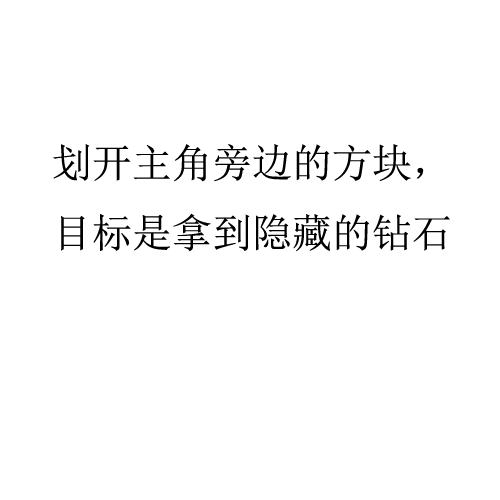
<style>
.page{position:relative;width:500px;height:500px;background:#ffffff}
.page>*{position:absolute;margin:0}
.t1{font:40px "SimSun";color:#000000}
</style>
<div class="page">
<p class="t1" style="left:53px;top:144px;width:397px;height:108px">划开主角旁边的方块，<br>目标是拿到隐藏的钻石</p>
</div>
